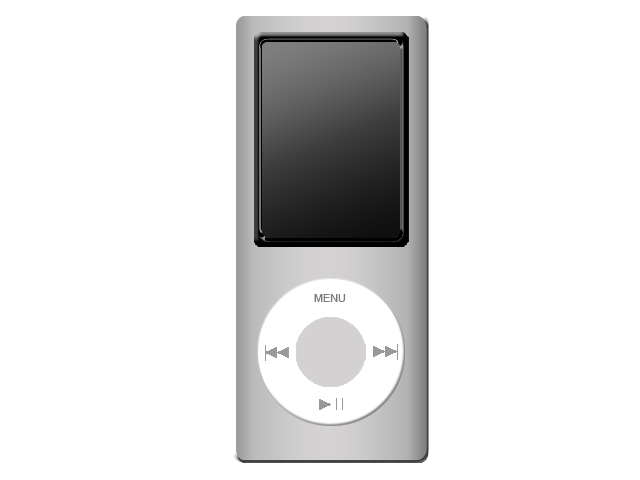
<style>
.page{position:relative;width:640px;height:480px;background:#ffffff}
.page>*{position:absolute;margin:0}
.t1{font:12px "Raavi";color:#7b7979}
</style>
<div class="page">
<p class="t1" style="left:314px;top:294px;width:32px;height:8px">MENU</p>
</div>
